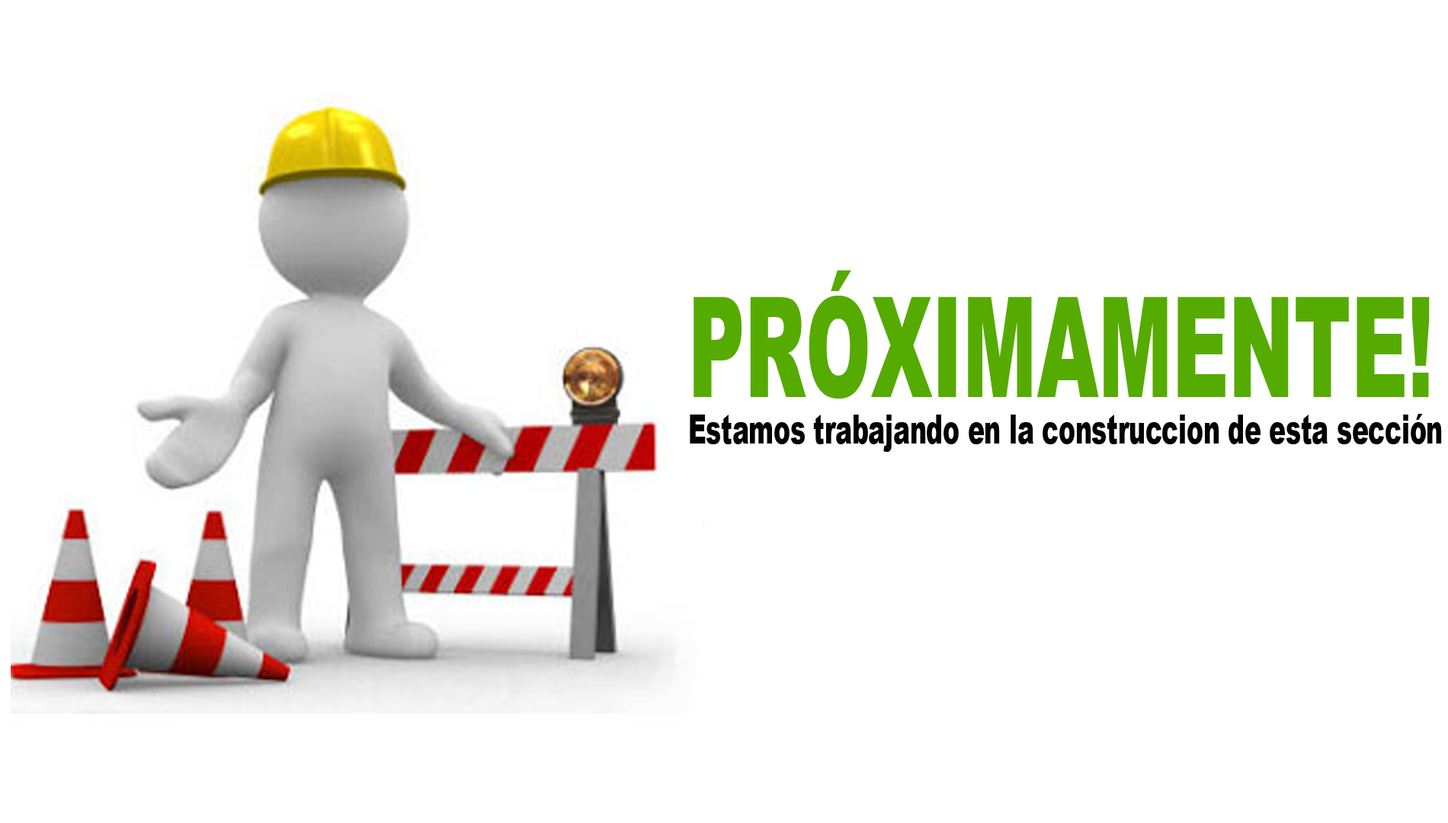
<style>
.page{position:relative;width:1448px;height:823px;background:#ffffff}
.page>*{position:absolute;margin:0}
.t1{font:139.9px "Arial-Black";color:#56ab01;scale:0.56 1}
.t2{font:40.5px "Arial-Black";color:#030303;scale:0.61 1}
</style>
<div class="page">
<p class="t1" style="left:694px;top:270px;width:736px;height:129px">PRÓXIMAMENTE!</p>
<p class="t2" style="left:690px;top:414px;width:752px;height:38px">Estamos trabajando en la construccion de esta sección</p>
</div>
